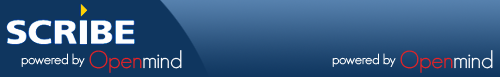
<style>
.page{position:relative;width:500px;height:77px;background:#0f365f}
.page>*{position:absolute;margin:0}
.t1{font:14px "GeosansLight";color:#ffffff}
.t2{font:24px "GeosansLight";color:#ed2123}
.t3{font:24px "GeosansLight";color:#ffffff}
</style>
<div class="page">
<p class="t1" style="left:21px;top:53px;width:64px;height:14px">powered by</p>
<p class="t2" style="left:89px;top:50px;width:93px;height:23px">Open<span class="t3">mind</span></p>
<p class="t1" style="left:332px;top:53px;width:64px;height:14px">powered by</p>
<p class="t2" style="left:400px;top:50px;width:93px;height:23px">Open<span class="t3">mind</span></p>
</div>
